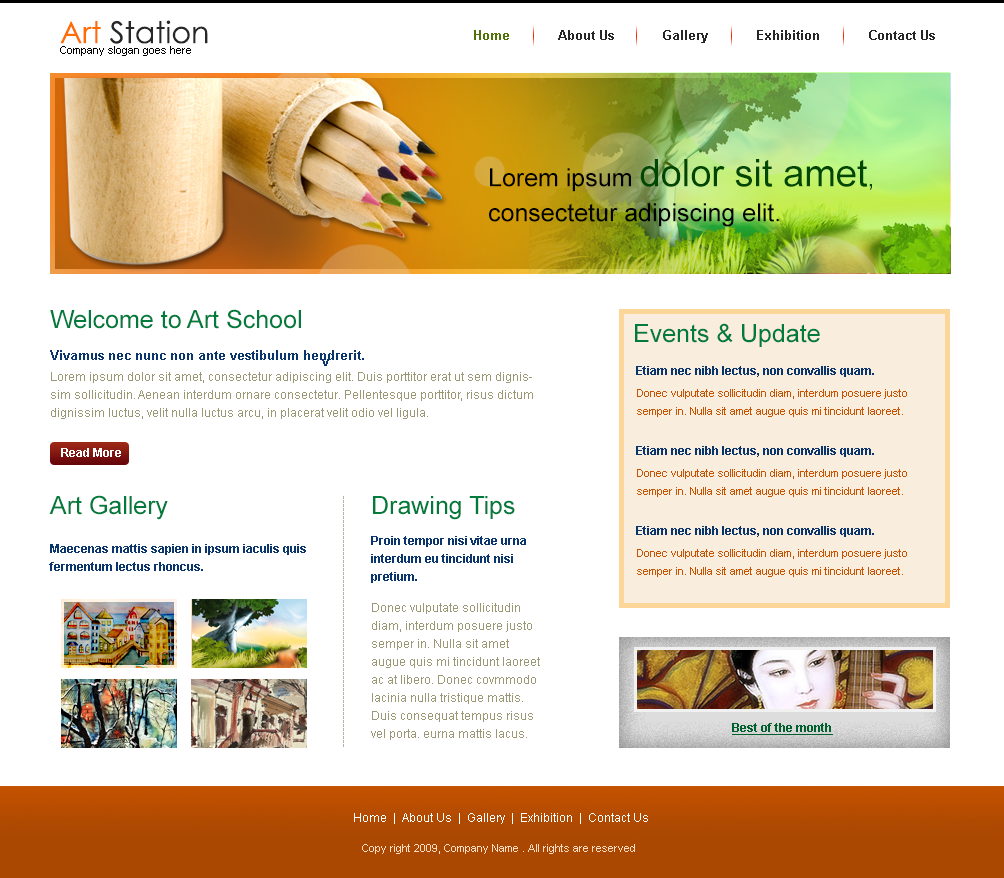
<style>
.page{position:relative;width:1004px;height:878px;background:#ffffff}
.page>*{position:absolute;margin:0}
.t1{font:30px "CenturyGothic";color:#272727}
.t2{font:30px "CenturyGothic";color:#ff6c00}
.t3{font:13px "Arial-BoldMT";color:#272727}
.t4{font:13px "Arial-BoldMT";color:#517208}
.t5{font:11px "ArialMT";color:#000000}
.t6{font:25px/35px "ArialMT";color:#000000}
.t7{font:38px/35px "ArialMT";color:#004802}
.t8{font:25px/35px "ArialMT";color:#004802}
.t9{font:25px "ArialMT";color:#007b3b}
.t10{font:13px "Arial-BoldMT";color:#0a356d}
.t11{font:12px "Arial-BoldMT";color:#0a356d}
.t12{font:12px/18px "ArialMT";color:#9b9875}
.t13{font:11px/18px "ArialMT";color:#c75300}
.t14{font:12px "Arial-BoldMT";color:#ffffff}
.t15{font:12px "ArialMT";color:#b3b2a3}
.t16{font:12px/18px "Arial-BoldMT";color:#0a356d}
.t17{font:12px "Arial-BoldMT";color:#02602f;text-decoration:underline}
.t18{font:12px "ArialMT";color:#ffffff}
.t19{font:11px "ArialMT";color:#fedbc2}
</style>
<div class="page">
<p class="t1" style="left:60px;top:20px;width:148px;height:24px"><span class="t2">Art </span>Station</p>
<p class="t3" style="left:474px;top:30px;width:461px;height:13px"><span class="t4">Home            </span>About Us            Gallery            Exhibition            Contact Us</p>
<p class="t5" style="left:60px;top:46px;width:131px;height:10px">Company slogan goes here</p>
<p class="t6" style="left:489px;top:159px;width:383px;height:68px">Lorem ipsum <span class="t7">dolor sit amet</span><span class="t8">,</span> consectetur adipiscing elit.</p>
<p class="t9" style="left:50px;top:309px;width:251px;height:20px">Welcome to Art School</p>
<p class="t9" style="left:635px;top:323px;width:185px;height:24px">Events &amp; Update</p>
<p class="t10" style="left:50px;top:350px;width:314px;height:10px">Vivamus nec nunc non ante vestibulum hendrerit.</p>
<p class="t10" style="left:322px;top:359px;width:7px;height:7px">v</p>
<p class="t11" style="left:636px;top:366px;width:238px;height:11px">Etiam nec nibh lectus, non convallis quam.</p>
<p class="t12" style="left:51px;top:372px;width:482px;height:47px">Lorem ipsum dolor sit amet, consectetur adipiscing elit. Duis porttitor erat ut sem dignissim sollicitudin. Aenean interdum ornare consectetur. Pellentesque porttitor, risus dictum dignissim luctus, velit nulla luctus arcu, in placerat velit odio vel ligula.</p>
<p class="t13" style="left:637px;top:389px;width:270px;height:28px">Donec vulputate sollicitudin diam, interdum posuere justo semper in. Nulla sit amet augue quis mi tincidunt laoreet.</p>
<p class="t14" style="left:61px;top:448px;width:60px;height:9px">Read More</p>
<p class="t11" style="left:636px;top:446px;width:238px;height:11px">Etiam nec nibh lectus, non convallis quam.</p>
<p class="t13" style="left:637px;top:469px;width:270px;height:28px">Donec vulputate sollicitudin diam, interdum posuere justo semper in. Nulla sit amet augue quis mi tincidunt laoreet.</p>
<p class="t9" style="left:49px;top:495px;width:119px;height:25px">Art Gallery</p>
<p class="t15" style="left:343px;top:496px;width:1px;height:251px;rotate:90deg">---------------------------------------------------------------</p>
<p class="t9" style="left:373px;top:496px;width:142px;height:24px">Drawing Tips</p>
<p class="t11" style="left:636px;top:526px;width:238px;height:11px">Etiam nec nibh lectus, non convallis quam.</p>
<p class="t16" style="left:49px;top:544px;width:257px;height:27px">Maecenas mattis sapien in ipsum iaculis quis fermentum lectus rhoncus.</p>
<p class="t16" style="left:371px;top:536px;width:155px;height:47px">Proin tempor nisi vitae urna interdum eu tincidunt nisi pretium.</p>
<p class="t13" style="left:637px;top:549px;width:270px;height:28px">Donec vulputate sollicitudin diam, interdum posuere justo semper in. Nulla sit amet augue quis mi tincidunt laoreet.</p>
<p class="t12" style="left:371px;top:603px;width:169px;height:137px">Donec vulputate sollicitudin diam, interdum posuere justo semper in. Nulla sit amet augue quis mi tincidunt laoreet ac at libero. Donec covmmodo lacinia nulla tristique mattis. Duis consequat tempus risus vel porta. eurna mattis lacus.</p>
<p class="t17" style="left:732px;top:723px;width:101px;height:12px">Best of the month</p>
<p class="t18" style="left:354px;top:813px;width:294px;height:11px">Home  |  About Us  |  Gallery  |  Exhibition  |  Contact Us</p>
<p class="t19" style="left:362px;top:844px;width:273px;height:10px">Copy right 2009, Company Name . All rights are reserved</p>
</div>
